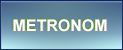
<style>
.page{position:relative;width:123px;height:50px}
.page>*{position:absolute;margin:0}
.t1{font:16px "Arial-BoldMT";color:#ffffff}
</style>
<div class="page">
<p class="t1" style="left:13px;top:19px;width:94px;height:13px">METRONOM</p>
</div>
